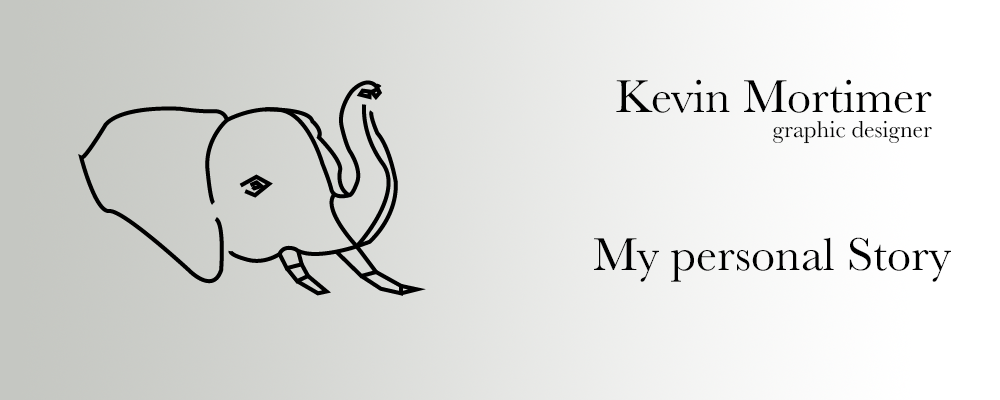
<style>
.page{position:relative;width:1000px;height:400px}
.page>*{position:absolute;margin:0}
.t1{font:48px "Baskerville";color:#000000}
.t2{font:24px "Baskerville";color:#000000}
</style>
<div class="page">
<p class="t1" style="left:616px;top:79px;width:316px;height:34px">Kevin Mortimer</p>
<p class="t2" style="left:773px;top:120px;width:159px;height:24px">graphic designer</p>
<p class="t1" style="left:594px;top:237px;width:357px;height:45px">My personal Story</p>
</div>
